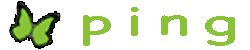
<style>
.page{position:relative;width:250px;height:50px;background:#ffffff}
.page>*{position:absolute;margin:0}
.t1{font:40px "ChalkboardSE-Regular";letter-spacing:0.2em;color:#89c236;scale:1.65 1}
</style>
<div class="page">
<p class="t1" style="left:83px;top:7px;width:152px;height:39px">ping</p>
</div>
